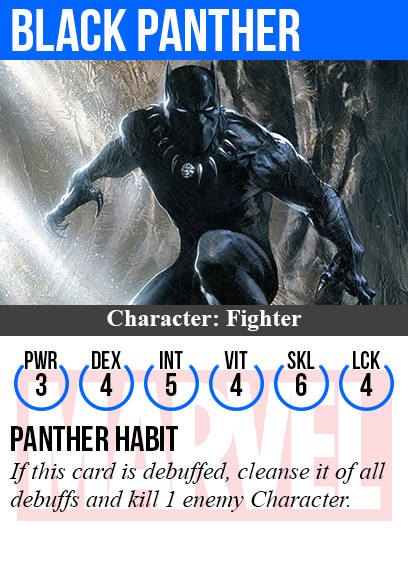
<style>
.page{position:relative;width:408px;height:585px;background:#ffffff}
.page>*{position:absolute;margin:0}
.t1{font:60px "BebasNeue";color:#ffffff}
.t2{font:24px "TimesNewRomanPS-BoldMT";color:#ffffff}
.t3{font:25px "BebasNeue";color:#000000}
.t4{font:32px "BebasNeue";color:#000000}
.t5{font:36px "BebasNeue";color:#000000}
.t6{font:24px "TimesNewRomanPS-ItalicMT";color:#000000}
</style>
<div class="page">
<p class="t1" style="left:12px;top:9px;width:288px;height:42px">black panther</p>
<p class="t2" style="left:107px;top:310px;width:195px;height:21px">Character: Fighter</p>
<p class="t3" style="left:25px;top:351px;width:32px;height:18px">PWR</p>
<p class="t3" style="left:92px;top:351px;width:29px;height:18px">dex</p>
<p class="t3" style="left:160px;top:351px;width:23px;height:18px">int</p>
<p class="t3" style="left:224px;top:351px;width:24px;height:18px">vit</p>
<p class="t3" style="left:287px;top:351px;width:28px;height:18px">skl</p>
<p class="t3" style="left:353px;top:351px;width:27px;height:18px">lck</p>
<p class="t4" style="left:36px;top:373px;width:11px;height:23px">3</p>
<p class="t4" style="left:100px;top:373px;width:13px;height:23px">4</p>
<p class="t4" style="left:166px;top:373px;width:11px;height:23px">5</p>
<p class="t4" style="left:230px;top:373px;width:13px;height:23px">4</p>
<p class="t4" style="left:296px;top:373px;width:11px;height:23px">6</p>
<p class="t4" style="left:360px;top:373px;width:13px;height:23px">4</p>
<p class="t5" style="left:11px;top:426px;width:167px;height:25px">panther habit</p>
<p class="t6" style="left:9px;top:462px;width:377px;height:50px">If this card is debuffed, cleanse it of all<br>debuffs and kill 1 enemy Character.</p>
</div>
